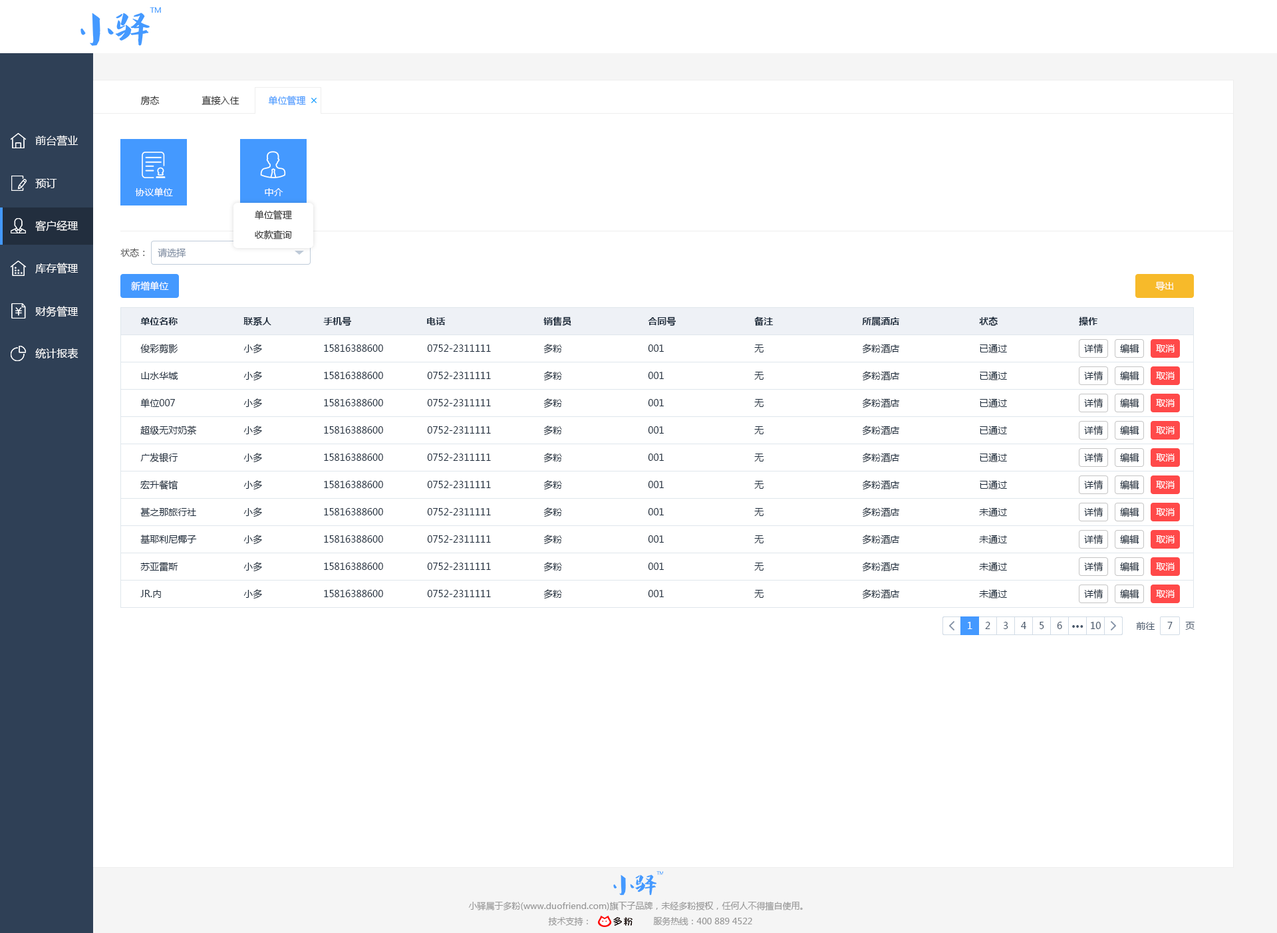
<style>
.page{position:relative;width:1277px;height:933px;background:#ffffff}
.page>*{position:absolute;margin:0}
.t1{font:9.3px "MicrosoftYaHei";color:#333333}
.t2{font:9.3px "MicrosoftYaHei";color:#4499ff}
.t3{font:10.6px "MicrosoftYaHei";color:#ffffff}
.t4{font:9.3px "MicrosoftYaHei";color:#ffffff}
.t5{font:9.3px "MicrosoftYaHei";color:#505050}
.t6{font:9.3px "MicrosoftYaHei";color:#8391a5}
.t7{font:9.3px "MicrosoftYaHei-Bold";color:#1f2d3d}
.t8{font:9.3px "MicrosoftYaHei";color:#1f2d3d}
.t9{font:9.3px "MicrosoftYaHei";color:#48576a}
.t10{font:9.3px "MicrosoftYaHei-Bold";color:#48576a}
.t11{font:8.6px "MicrosoftYaHei";color:#999999}
</style>
<div class="page">
<p class="t1" style="left:140px;top:96px;width:20px;height:9px">房态</p>
<p class="t1" style="left:202px;top:96px;width:38px;height:9px">直接入住</p>
<p class="t2" style="left:268px;top:96px;width:38px;height:10px">单位管理</p>
<p class="t3" style="left:35px;top:135px;width:44px;height:11px">前台营业</p>
<p class="t3" style="left:35px;top:178px;width:22px;height:10px">预订</p>
<p class="t4" style="left:135px;top:188px;width:38px;height:9px">协议单位</p>
<p class="t4" style="left:265px;top:188px;width:18px;height:8px">中介</p>
<p class="t3" style="left:35px;top:220px;width:44px;height:12px">客户经理</p>
<p class="t1" style="left:255px;top:210px;width:37px;height:10px">单位管理</p>
<p class="t1" style="left:255px;top:230px;width:37px;height:10px">收款查询</p>
<p class="t5" style="left:120px;top:248px;width:25px;height:9px">状态：</p>
<p class="t6" style="left:158px;top:248px;width:28px;height:9px">请选择</p>
<p class="t3" style="left:35px;top:263px;width:44px;height:11px">库存管理</p>
<p class="t4" style="left:131px;top:281px;width:38px;height:10px">新增单位</p>
<p class="t4" style="left:1156px;top:281px;width:18px;height:10px">导出</p>
<p class="t3" style="left:35px;top:306px;width:44px;height:11px">财务管理</p>
<p class="t7" style="left:140px;top:317px;width:38px;height:8px">单位名称</p>
<p class="t7" style="left:244px;top:317px;width:27px;height:9px">联系人</p>
<p class="t7" style="left:323px;top:317px;width:28px;height:9px">手机号</p>
<p class="t7" style="left:427px;top:317px;width:19px;height:8px">电话</p>
<p class="t7" style="left:544px;top:317px;width:28px;height:9px">销售员</p>
<p class="t7" style="left:648px;top:317px;width:28px;height:9px">合同号</p>
<p class="t7" style="left:754px;top:317px;width:20px;height:9px">备注</p>
<p class="t7" style="left:862px;top:317px;width:38px;height:9px">所属酒店</p>
<p class="t7" style="left:979px;top:317px;width:19px;height:9px">状态</p>
<p class="t7" style="left:1079px;top:317px;width:19px;height:9px">操作</p>
<p class="t3" style="left:35px;top:348px;width:44px;height:11px">统计报表</p>
<p class="t8" style="left:140px;top:344px;width:38px;height:10px">俊彩剪影</p>
<p class="t8" style="left:244px;top:344px;width:18px;height:10px">小多</p>
<p class="t8" style="left:324px;top:345px;width:59px;height:7px">15816388600</p>
<p class="t8" style="left:427px;top:345px;width:64px;height:7px">0752-2311111</p>
<p class="t8" style="left:544px;top:344px;width:18px;height:10px">多粉</p>
<p class="t8" style="left:648px;top:345px;width:16px;height:7px">001</p>
<p class="t8" style="left:754px;top:345px;width:10px;height:8px">无</p>
<p class="t8" style="left:862px;top:344px;width:38px;height:10px">多粉酒店</p>
<p class="t8" style="left:980px;top:344px;width:27px;height:9px">已通过</p>
<p class="t8" style="left:1084px;top:344px;width:20px;height:9px">详情</p>
<p class="t8" style="left:1120px;top:344px;width:20px;height:9px">编辑</p>
<p class="t4" style="left:1156px;top:345px;width:19px;height:8px">取消</p>
<p class="t8" style="left:141px;top:372px;width:37px;height:8px">山水华城</p>
<p class="t8" style="left:244px;top:371px;width:18px;height:10px">小多</p>
<p class="t8" style="left:324px;top:372px;width:59px;height:7px">15816388600</p>
<p class="t8" style="left:427px;top:372px;width:64px;height:7px">0752-2311111</p>
<p class="t8" style="left:544px;top:371px;width:18px;height:10px">多粉</p>
<p class="t8" style="left:648px;top:372px;width:16px;height:7px">001</p>
<p class="t8" style="left:754px;top:372px;width:10px;height:8px">无</p>
<p class="t8" style="left:862px;top:371px;width:38px;height:10px">多粉酒店</p>
<p class="t8" style="left:980px;top:371px;width:27px;height:10px">已通过</p>
<p class="t8" style="left:1084px;top:371px;width:20px;height:10px">详情</p>
<p class="t8" style="left:1120px;top:371px;width:20px;height:10px">编辑</p>
<p class="t4" style="left:1156px;top:372px;width:19px;height:8px">取消</p>
<p class="t8" style="left:140px;top:399px;width:35px;height:9px">单位007</p>
<p class="t8" style="left:244px;top:399px;width:18px;height:10px">小多</p>
<p class="t8" style="left:324px;top:399px;width:59px;height:8px">15816388600</p>
<p class="t8" style="left:427px;top:399px;width:64px;height:8px">0752-2311111</p>
<p class="t8" style="left:544px;top:399px;width:18px;height:10px">多粉</p>
<p class="t8" style="left:648px;top:399px;width:16px;height:8px">001</p>
<p class="t8" style="left:754px;top:399px;width:10px;height:8px">无</p>
<p class="t8" style="left:862px;top:399px;width:38px;height:10px">多粉酒店</p>
<p class="t8" style="left:980px;top:399px;width:27px;height:9px">已通过</p>
<p class="t8" style="left:1084px;top:399px;width:20px;height:9px">详情</p>
<p class="t8" style="left:1120px;top:399px;width:20px;height:9px">编辑</p>
<p class="t4" style="left:1156px;top:399px;width:19px;height:8px">取消</p>
<p class="t8" style="left:140px;top:426px;width:57px;height:9px">超级无对奶茶</p>
<p class="t8" style="left:244px;top:426px;width:18px;height:10px">小多</p>
<p class="t8" style="left:544px;top:426px;width:18px;height:10px">多粉</p>
<p class="t8" style="left:862px;top:426px;width:38px;height:10px">多粉酒店</p>
<p class="t8" style="left:980px;top:426px;width:27px;height:9px">已通过</p>
<p class="t8" style="left:1084px;top:426px;width:20px;height:9px">详情</p>
<p class="t8" style="left:1120px;top:426px;width:20px;height:9px">编辑</p>
<p class="t8" style="left:324px;top:426px;width:59px;height:8px">15816388600</p>
<p class="t8" style="left:427px;top:426px;width:64px;height:8px">0752-2311111</p>
<p class="t8" style="left:648px;top:426px;width:16px;height:8px">001</p>
<p class="t8" style="left:754px;top:426px;width:10px;height:8px">无</p>
<p class="t4" style="left:1156px;top:426px;width:19px;height:8px">取消</p>
<p class="t8" style="left:140px;top:453px;width:38px;height:9px">广发银行</p>
<p class="t8" style="left:244px;top:453px;width:18px;height:10px">小多</p>
<p class="t8" style="left:324px;top:454px;width:59px;height:7px">15816388600</p>
<p class="t8" style="left:427px;top:454px;width:64px;height:7px">0752-2311111</p>
<p class="t8" style="left:544px;top:453px;width:18px;height:10px">多粉</p>
<p class="t8" style="left:648px;top:454px;width:16px;height:7px">001</p>
<p class="t8" style="left:754px;top:454px;width:10px;height:8px">无</p>
<p class="t8" style="left:862px;top:453px;width:38px;height:10px">多粉酒店</p>
<p class="t8" style="left:980px;top:453px;width:27px;height:9px">已通过</p>
<p class="t8" style="left:1084px;top:453px;width:20px;height:9px">详情</p>
<p class="t8" style="left:1120px;top:453px;width:20px;height:9px">编辑</p>
<p class="t4" style="left:1156px;top:454px;width:19px;height:8px">取消</p>
<p class="t8" style="left:140px;top:480px;width:38px;height:10px">宏升餐馆</p>
<p class="t8" style="left:244px;top:480px;width:18px;height:10px">小多</p>
<p class="t8" style="left:324px;top:481px;width:59px;height:7px">15816388600</p>
<p class="t8" style="left:427px;top:481px;width:64px;height:7px">0752-2311111</p>
<p class="t8" style="left:544px;top:480px;width:18px;height:10px">多粉</p>
<p class="t8" style="left:648px;top:481px;width:16px;height:7px">001</p>
<p class="t8" style="left:754px;top:481px;width:10px;height:8px">无</p>
<p class="t8" style="left:862px;top:480px;width:38px;height:10px">多粉酒店</p>
<p class="t8" style="left:980px;top:480px;width:27px;height:10px">已通过</p>
<p class="t8" style="left:1084px;top:480px;width:20px;height:10px">详情</p>
<p class="t8" style="left:1120px;top:480px;width:20px;height:10px">编辑</p>
<p class="t4" style="left:1156px;top:481px;width:19px;height:8px">取消</p>
<p class="t8" style="left:140px;top:508px;width:56px;height:9px">甚之那旅行社</p>
<p class="t8" style="left:244px;top:508px;width:18px;height:10px">小多</p>
<p class="t8" style="left:324px;top:508px;width:59px;height:8px">15816388600</p>
<p class="t8" style="left:427px;top:508px;width:64px;height:8px">0752-2311111</p>
<p class="t8" style="left:544px;top:508px;width:18px;height:10px">多粉</p>
<p class="t8" style="left:648px;top:508px;width:16px;height:8px">001</p>
<p class="t8" style="left:754px;top:508px;width:10px;height:8px">无</p>
<p class="t8" style="left:862px;top:508px;width:38px;height:10px">多粉酒店</p>
<p class="t8" style="left:979px;top:508px;width:28px;height:9px">未通过</p>
<p class="t8" style="left:1084px;top:508px;width:20px;height:9px">详情</p>
<p class="t8" style="left:1120px;top:508px;width:20px;height:9px">编辑</p>
<p class="t4" style="left:1156px;top:508px;width:19px;height:8px">取消</p>
<p class="t8" style="left:140px;top:535px;width:57px;height:9px">基耶利尼椰子</p>
<p class="t8" style="left:244px;top:535px;width:18px;height:10px">小多</p>
<p class="t8" style="left:324px;top:536px;width:59px;height:7px">15816388600</p>
<p class="t8" style="left:427px;top:536px;width:64px;height:7px">0752-2311111</p>
<p class="t8" style="left:544px;top:535px;width:18px;height:10px">多粉</p>
<p class="t8" style="left:648px;top:536px;width:16px;height:7px">001</p>
<p class="t8" style="left:754px;top:536px;width:10px;height:8px">无</p>
<p class="t8" style="left:862px;top:535px;width:38px;height:10px">多粉酒店</p>
<p class="t8" style="left:979px;top:535px;width:28px;height:9px">未通过</p>
<p class="t8" style="left:1084px;top:535px;width:20px;height:9px">详情</p>
<p class="t8" style="left:1120px;top:535px;width:20px;height:9px">编辑</p>
<p class="t4" style="left:1156px;top:536px;width:19px;height:8px">取消</p>
<p class="t8" style="left:140px;top:562px;width:38px;height:10px">苏亚雷斯</p>
<p class="t8" style="left:244px;top:562px;width:18px;height:10px">小多</p>
<p class="t8" style="left:324px;top:563px;width:59px;height:7px">15816388600</p>
<p class="t8" style="left:427px;top:563px;width:64px;height:7px">0752-2311111</p>
<p class="t8" style="left:544px;top:562px;width:18px;height:10px">多粉</p>
<p class="t8" style="left:648px;top:563px;width:16px;height:7px">001</p>
<p class="t8" style="left:754px;top:563px;width:10px;height:8px">无</p>
<p class="t8" style="left:862px;top:562px;width:38px;height:10px">多粉酒店</p>
<p class="t8" style="left:979px;top:562px;width:28px;height:10px">未通过</p>
<p class="t8" style="left:1084px;top:562px;width:20px;height:10px">详情</p>
<p class="t8" style="left:1120px;top:562px;width:20px;height:10px">编辑</p>
<p class="t4" style="left:1156px;top:563px;width:19px;height:8px">取消</p>
<p class="t8" style="left:140px;top:590px;width:21px;height:8px">JR.内</p>
<p class="t8" style="left:244px;top:589px;width:18px;height:10px">小多</p>
<p class="t8" style="left:324px;top:590px;width:59px;height:7px">15816388600</p>
<p class="t8" style="left:427px;top:590px;width:64px;height:7px">0752-2311111</p>
<p class="t8" style="left:544px;top:589px;width:18px;height:10px">多粉</p>
<p class="t8" style="left:648px;top:590px;width:16px;height:7px">001</p>
<p class="t8" style="left:754px;top:590px;width:10px;height:8px">无</p>
<p class="t8" style="left:862px;top:589px;width:38px;height:10px">多粉酒店</p>
<p class="t8" style="left:979px;top:589px;width:28px;height:10px">未通过</p>
<p class="t8" style="left:1084px;top:589px;width:20px;height:10px">详情</p>
<p class="t8" style="left:1120px;top:589px;width:20px;height:10px">编辑</p>
<p class="t4" style="left:1156px;top:590px;width:19px;height:8px">取消</p>
<p class="t4" style="left:968px;top:622px;width:5px;height:7px">1</p>
<p class="t9" style="left:985px;top:622px;width:6px;height:7px">2</p>
<p class="t9" style="left:1003px;top:622px;width:6px;height:7px">3</p>
<p class="t9" style="left:1021px;top:622px;width:6px;height:7px">4</p>
<p class="t9" style="left:1040px;top:622px;width:5px;height:7px">5</p>
<p class="t9" style="left:1057px;top:622px;width:6px;height:7px">6</p>
<p class="t10" style="left:1073px;top:625px;width:11px;height:3px">···</p>
<p class="t9" style="left:1091px;top:622px;width:10px;height:7px">10</p>
<p class="t9" style="left:1136px;top:622px;width:20px;height:8px">前往</p>
<p class="t9" style="left:1168px;top:622px;width:5px;height:7px">7</p>
<p class="t9" style="left:1186px;top:622px;width:9px;height:8px">页</p>
<p class="t11" style="left:468px;top:902px;width:335px;height:9px">小驿属于多粉(www.duofriend.com)旗下子品牌，未经多粉授权，任何人不得擅自使用。</p>
<p class="t11" style="left:548px;top:917px;width:40px;height:9px">技术支持：</p>
<p class="t11" style="left:653px;top:917px;width:99px;height:9px">服务热线：400 889 4522</p>
</div>
